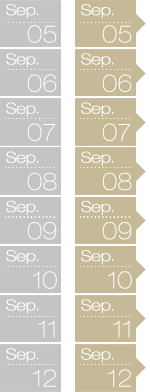
<style>
.page{position:relative;width:150px;height:392px;background:#c6b997}
.page>*{position:absolute;margin:0}
.t1{font:15.1px/27.4px "HelveticaNeueLTPro-ThEx";color:#ffffff;font-weight:bold}
.t2{font:23.6px/27.4px "HelveticaNeueLTPro-ThEx";color:#ffffff}
</style>
<div class="page">
<p class="t1" style="left:6px;top:4px;width:51px;height:39px">Sep.<br>  <span class="t2">  05</span></p>
<p class="t1" style="left:81px;top:4px;width:51px;height:39px">Sep.<br>  <span class="t2">  05</span></p>
<p class="t1" style="left:6px;top:53px;width:51px;height:39px">Sep.<br>  <span class="t2">  06</span></p>
<p class="t1" style="left:81px;top:53px;width:51px;height:39px">Sep.<br>  <span class="t2">  06</span></p>
<p class="t1" style="left:6px;top:102px;width:50px;height:39px">Sep.<br>  <span class="t2">  07</span></p>
<p class="t1" style="left:81px;top:102px;width:50px;height:39px">Sep.<br>  <span class="t2">  07</span></p>
<p class="t1" style="left:6px;top:151px;width:51px;height:40px">Sep.<br>  <span class="t2">  08</span></p>
<p class="t1" style="left:81px;top:151px;width:51px;height:40px">Sep.<br>  <span class="t2">  08</span></p>
<p class="t1" style="left:6px;top:200px;width:51px;height:40px">Sep.<br>  <span class="t2">  09</span></p>
<p class="t1" style="left:81px;top:200px;width:51px;height:40px">Sep.<br>  <span class="t2">  09</span></p>
<p class="t1" style="left:6px;top:250px;width:51px;height:39px">Sep.<br>  <span class="t2">   10</span></p>
<p class="t1" style="left:81px;top:250px;width:51px;height:39px">Sep.<br>  <span class="t2">   10</span></p>
<p class="t1" style="left:6px;top:299px;width:49px;height:39px">Sep.<br>  <span class="t2">    11</span></p>
<p class="t1" style="left:81px;top:299px;width:49px;height:39px">Sep.<br>  <span class="t2">    11</span></p>
<p class="t1" style="left:6px;top:348px;width:50px;height:39px">Sep.<br>  <span class="t2">   12</span></p>
<p class="t1" style="left:81px;top:348px;width:50px;height:39px">Sep.<br>  <span class="t2">   12</span></p>
</div>
